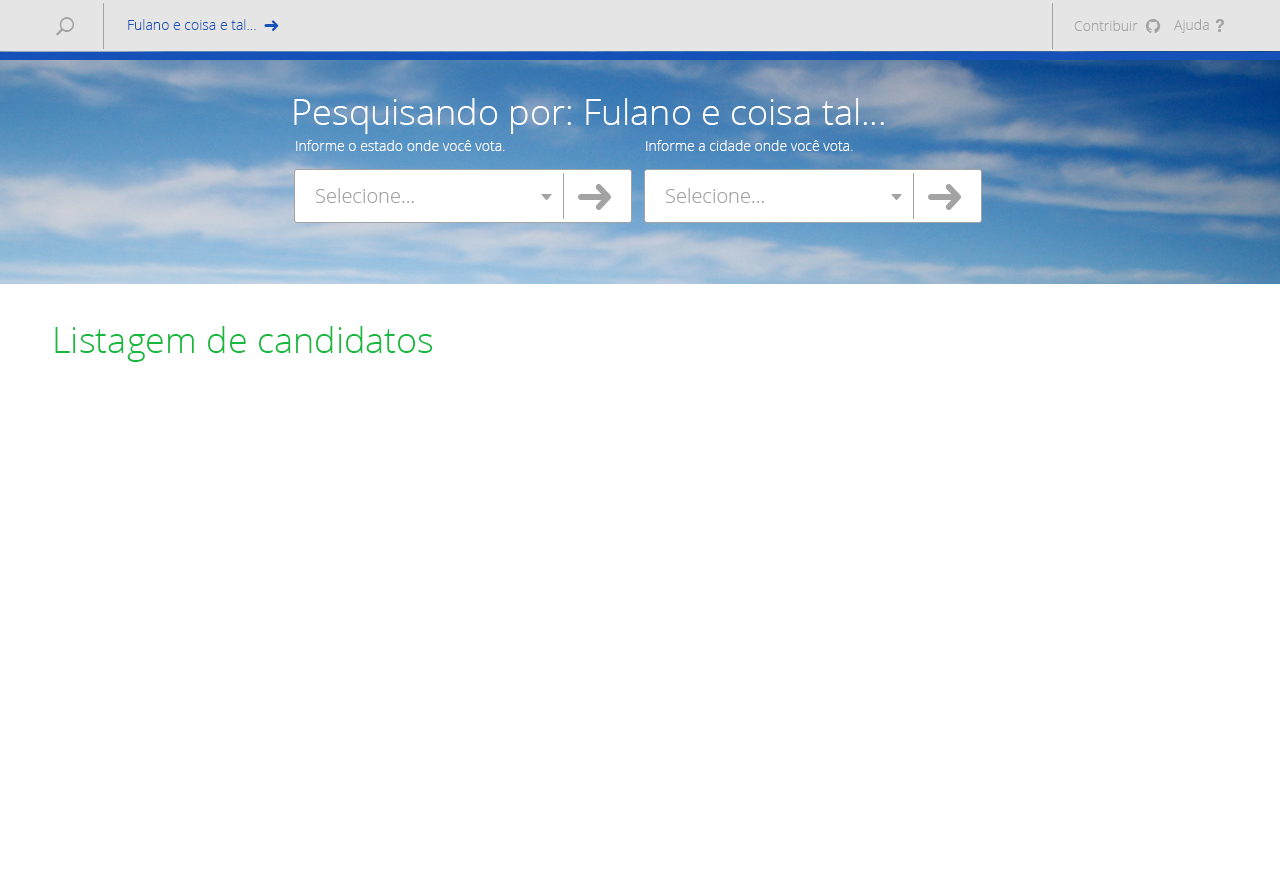
<style>
.page{position:relative;width:1280px;height:886px;background:#ffffff}
.page>*{position:absolute;margin:0}
.t1{font:14px "OpenSans-Light";color:#1651b8}
.t2{font:14px "OpenSans-Light";color:#a4a4a4}
.t3{font:36px "OpenSans-Light";color:#ffffff}
.t4{font:14px "OpenSans-Light";color:#ffffff}
.t5{font:20px "OpenSans-Light";color:#a3a3a3}
.t6{font:36px "OpenSans-Light";color:#16b83e}
</style>
<div class="page">
<p class="t1" style="left:128px;top:19px;width:128px;height:11px">Fulano e coisa e tal...</p>
<p class="t2" style="left:1074px;top:20px;width:64px;height:11px">Contribuir</p>
<p class="t2" style="left:1174px;top:19px;width:35px;height:14px">Ajuda</p>
<p class="t3" style="left:294px;top:98px;width:590px;height:36px">Pesquisando por: Fulano e coisa tal...</p>
<p class="t4" style="left:296px;top:140px;width:209px;height:11px">Informe o estado onde você vota.</p>
<p class="t4" style="left:646px;top:140px;width:207px;height:11px">Informe a cidade onde você vota.</p>
<p class="t5" style="left:316px;top:188px;width:98px;height:15px">Selecione...</p>
<p class="t5" style="left:666px;top:188px;width:98px;height:15px">Selecione...</p>
<p class="t6" style="left:55px;top:326px;width:378px;height:36px">Listagem de candidatos</p>
</div>
